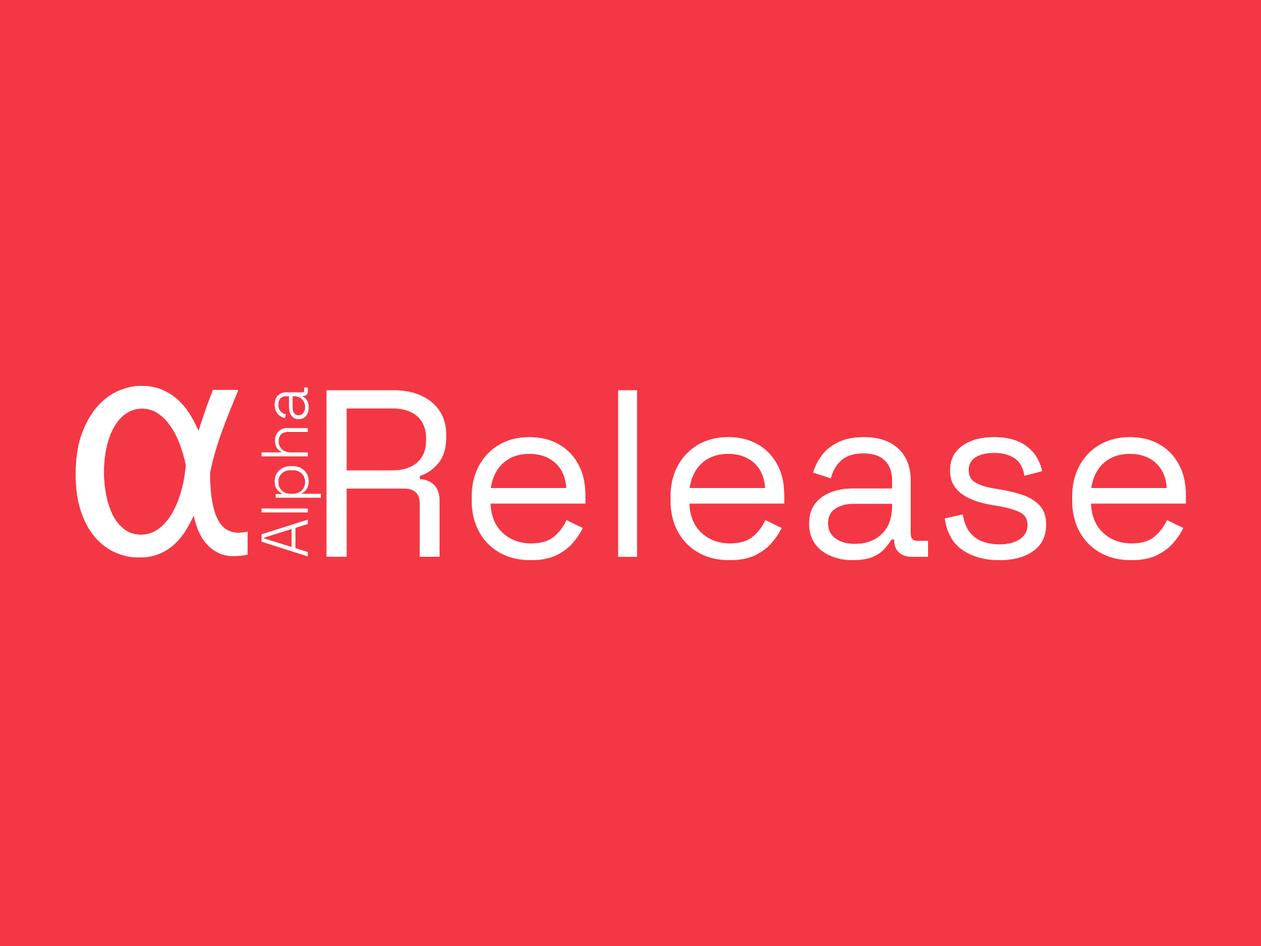
<style>
.page{position:relative;width:1261px;height:946px;background:#f43744}
.page>*{position:absolute;margin:0}
.t1{font:352.1px "Corbel";color:#ffffff}
.t2{font:66px "SpaceGrotesk-Light";color:#ffffff;scale:0.97 1}
.t3{font:237.7px "SpaceGrotesk-Regular";color:#ffffff}
</style>
<div class="page">
<p class="t1" style="left:75px;top:386px;width:173px;height:171px">α</p>
<p class="t2" style="left:262px;top:387px;width:59px;height:170px;rotate:-90deg">Alpha</p>
<p class="t3" style="left:326px;top:390px;width:860px;height:170px">Release</p>
</div>
